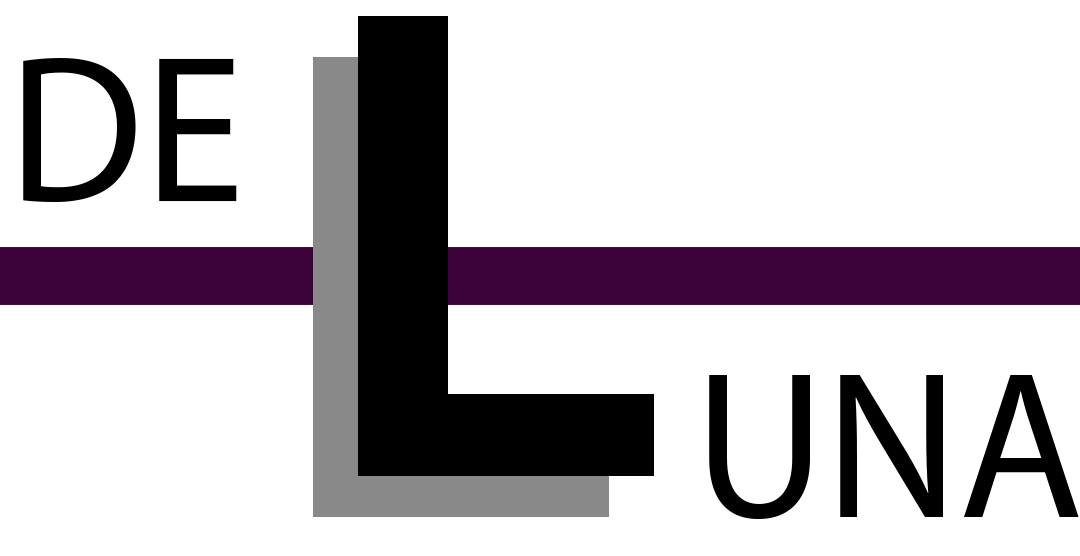
<style>
.page{position:relative;width:1080px;height:556px;background:#ffffff}
.page>*{position:absolute;margin:0}
.t1{font:211px "MyriadPro-Regular";color:#000000;scale:0.96 1}
</style>
<div class="page">
<p class="t1" style="left:23px;top:58px;width:214px;height:144px">DE</p>
<p class="t1" style="left:709px;top:375px;width:370px;height:144px">UNA</p>
</div>
